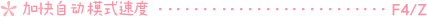
<style>
.page{position:relative;width:427px;height:17px;background:#ffffff}
.page>*{position:absolute;margin:0}
.t1{font:18px "¢è?";color:#ff93a5}
</style>
<div class="page">
<p class="t1" style="left:23px;top:0px;width:125px;height:16px">加快自动模式速度</p>
</div>
